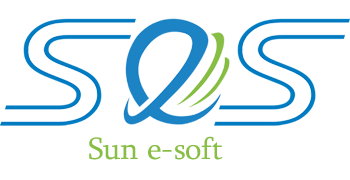
<style>
.page{position:relative;width:350px;height:180px;background:#ffffff}
.page>*{position:absolute;margin:0}
.t1{font:31.6px "Sylfaen";color:#88be46}
</style>
<div class="page">
<p class="t1" style="left:89px;top:136px;width:134px;height:24px">Sun e-soft</p>
</div>
